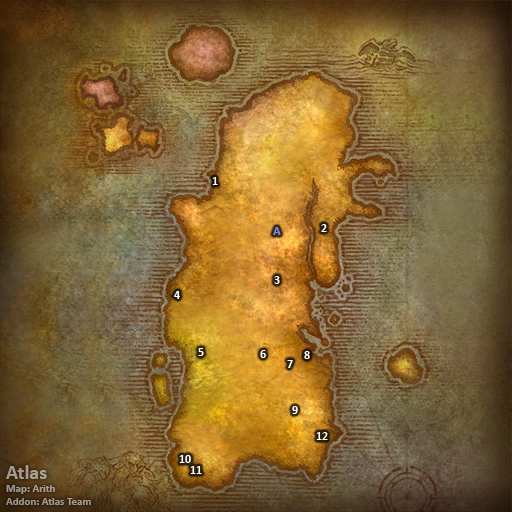
<style>
.page{position:relative;width:512px;height:512px}
.page>*{position:absolute;margin:0}
.t1{font:12px "Calibri-Bold";color:#ffffff}
.t2{font:12px "Calibri-Bold";color:#8788ee}
.t3{font:11px "Calibri-Bold";color:#a49b92}
.t4{font:20px "Calibri-Bold";color:#a49b92}
</style>
<div class="page">
<p class="t1" style="left:212px;top:177px;width:6px;height:8px">1</p>
<p class="t2" style="left:273px;top:227px;width:8px;height:8px">A</p>
<p class="t1" style="left:321px;top:224px;width:6px;height:8px">2</p>
<p class="t1" style="left:274px;top:276px;width:6px;height:8px">3</p>
<p class="t1" style="left:174px;top:291px;width:6px;height:8px">4</p>
<p class="t1" style="left:198px;top:348px;width:6px;height:8px">5</p>
<p class="t1" style="left:260px;top:350px;width:6px;height:8px">6</p>
<p class="t1" style="left:304px;top:351px;width:6px;height:8px">8</p>
<p class="t1" style="left:287px;top:360px;width:6px;height:8px">7</p>
<p class="t1" style="left:292px;top:406px;width:6px;height:8px">9</p>
<p class="t1" style="left:316px;top:432px;width:12px;height:8px">12</p>
<p class="t1" style="left:179px;top:455px;width:12px;height:8px">10</p>
<p class="t3" style="left:6px;top:465px;width:85px;height:40px"><span class="t4">Atlas<br></span>Map: Arith<br>Addon: Atlas Team</p>
<p class="t1" style="left:190px;top:466px;width:12px;height:8px">11</p>
</div>
